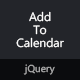
<style>
.page{position:relative;width:80px;height:80px;background:#23252a}
.page>*{position:absolute;margin:0}
.t1{font:12px/13px "SegoeWP";color:#ffffff}
.t2{font:10px "SegoeWP";color:#ababab}
</style>
<div class="page">
<p class="t1" style="left:16px;top:11px;width:48px;height:37px;text-align:center">Add<br>To<br>Calendar</p>
<p class="t2" style="left:23px;top:64px;width:32px;height:11px">jQuery</p>
</div>
